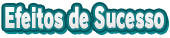
<style>
.page{position:relative;width:170px;height:38px;background:#ffffff}
.page>*{position:absolute;margin:0}
.t1{font:26.7px "RodinPro-UB";color:#f0f0f1;scale:0.58 1}
</style>
<div class="page">
<p class="t1" style="left:5px;top:6px;width:159px;height:23px">Efeitos de Sucesso</p>
</div>
